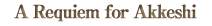
<style>
.page{position:relative;width:212px;height:26px;background:#ffffff}
.page>*{position:absolute;margin:0}
.t1{font:18px "RyuminPro-ExBold";letter-spacing:-0.08em;color:#6c573f;font-weight:bold}
</style>
<div class="page">
<p class="t1" style="left:14px;top:4px;width:183px;height:18px">A Requiem for Akkeshi</p>
</div>
